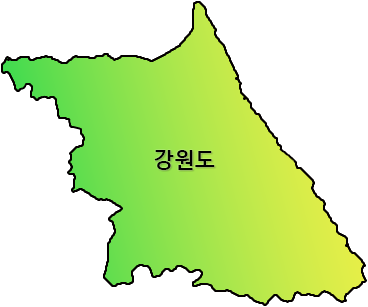
<style>
.page{position:relative;width:368px;height:307px;background:#ffffff}
.page>*{position:absolute;margin:0}
.t1{font:22px "HancomGothicBold";color:#000000}
</style>
<div class="page">
<p class="t1" style="left:154px;top:150px;width:61px;height:20px">강원도</p>
</div>
